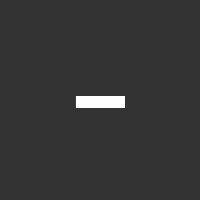
<style>
.page{position:relative;width:200px;height:200px;background:#333333}
.page>*{position:absolute;margin:0}
.t1{font:184px "SegoeUI";letter-spacing:0.06em;color:#ffffff}
</style>
<div class="page">
<p class="t1" style="left:75px;top:96px;width:50px;height:12px">-</p>
</div>
